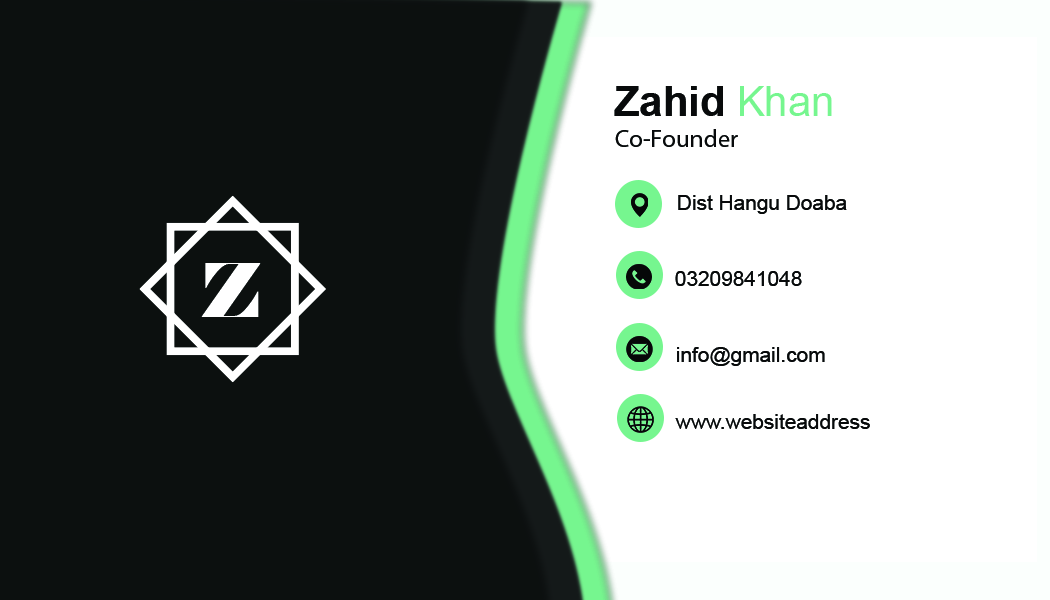
<style>
.page{position:relative;width:1050px;height:600px;background:#0c100f}
.page>*{position:absolute;margin:0}
.t1{font:41.7px "Arial-BoldMT";color:#080a0b}
.t2{font:41.7px "ArialMT";color:#76f68f}
.t3{font:25px "MyriadPro-Regular";color:#080a0b}
.t4{font:20.8px "ArialMT";color:#080a0b}
</style>
<div class="page">
<p class="t1" style="left:614px;top:86px;width:218px;height:30px">Zahid <span class="t2">Khan</span></p>
<p class="t3" style="left:615px;top:129px;width:123px;height:18px">Co-Founder</p>
<p class="t4" style="left:678px;top:195px;width:169px;height:19px">Dist Hangu Doaba</p>
<p class="t4" style="left:675px;top:271px;width:127px;height:15px">03209841048</p>
<p class="t4" style="left:677px;top:347px;width:148px;height:19px">info@gmail.com</p>
<p class="t4" style="left:675px;top:414px;width:195px;height:15px">www.websiteaddress</p>
</div>
